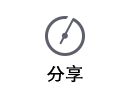
<style>
.page{position:relative;width:130px;height:100px;background:#ffffff}
.page>*{position:absolute;margin:0}
.t1{font:18px "STHeitiSC-Light";color:#000000;font-weight:bold}
</style>
<div class="page">
<p class="t1" style="left:47px;top:65px;width:36px;height:18px">分享</p>
</div>
